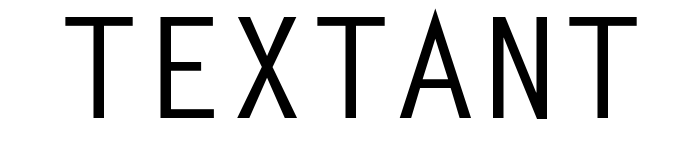
<style>
.page{position:relative;width:700px;height:142px;background:#ffffff}
.page>*{position:absolute;margin:0}
.t1{font:140px "LetterGothicStd-Bold";color:#000000}
</style>
<div class="page">
<p class="t1" style="left:65px;top:8px;width:572px;height:111px">TEXTANT</p>
</div>
